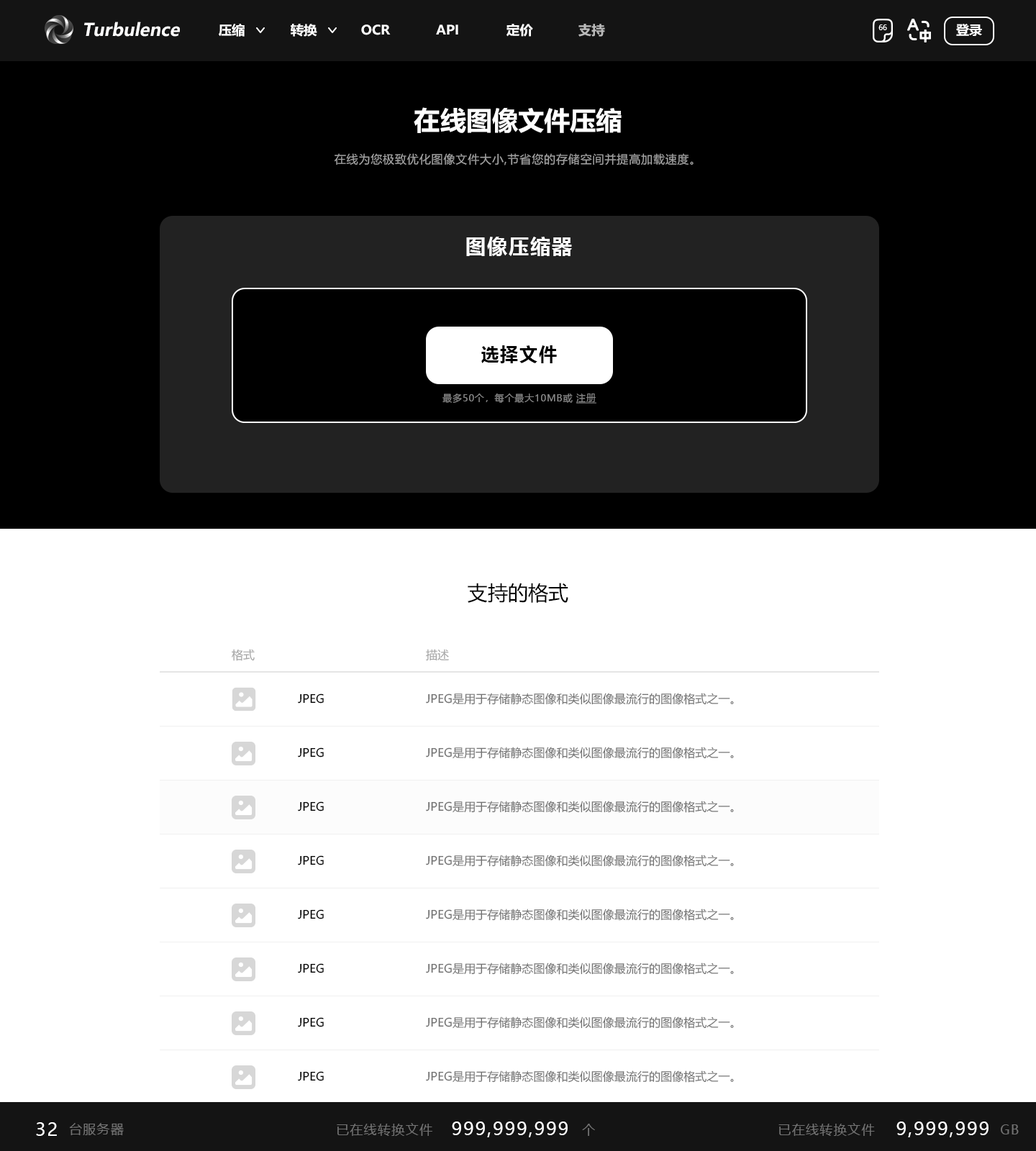
<style>
.page{position:relative;width:1036px;height:1151px;background:#ffffff}
.page>*{position:absolute;margin:0}
.t1{font:17.3px "MicrosoftYaHei-Bold";color:#fffefe;font-style:italic}
.t2{font:12.9px "MicrosoftYaHei-Bold";color:#ffffff}
.t3{font:12.9px "MicrosoftYaHei-Bold";color:#ffffff;text-transform:uppercase}
.t4{font:12.9px "MicrosoftYaHei-Bold";color:#bababa;text-transform:uppercase}
.t5{font:7.2px "MicrosoftYaHei";color:#ffffff;text-transform:uppercase}
.t6{font:25.9px "MicrosoftYaHei-Bold";color:#ffffff}
.t7{font:11.5px "MicrosoftYaHei";letter-spacing:0.05em;color:#a3a3a3}
.t8{font:20.1px "MicrosoftYaHei-Bold";letter-spacing:0.075em;color:#ffffff;text-transform:uppercase}
.t9{font:18px "MicrosoftYaHei-Bold";letter-spacing:0.075em;color:#000000}
.t10{font:9.4px "MicrosoftYaHei";letter-spacing:0.066em;color:#878787}
.t11{font:9.4px "MicrosoftYaHei";letter-spacing:0.066em;color:#878787;text-decoration:underline}
.t12{font:20.1px "MicrosoftYaHei";color:#000000}
.t13{font:11.5px "MicrosoftYaHei";color:#a3a3a3}
.t14{font:11.5px "MicrosoftYaHei";color:#000000}
.t15{font:11.5px "MicrosoftYaHei";color:#737373}
.t16{font:11.5px "MicrosoftYaHei";color:#727272}
.t17{font:18px "MicrosoftYaHei";letter-spacing:0.075em;color:#ffffff;text-transform:uppercase}
.t18{font:18px "MicrosoftYaHei";letter-spacing:0.075em;color:#ffffff}
.t19{font:12.9px "MicrosoftYaHei";letter-spacing:0.075em;color:#727272}
</style>
<div class="page">
<p class="t1" style="left:84px;top:22px;width:96px;height:15px">Turbulence</p>
<p class="t2" style="left:219px;top:24px;width:26px;height:13px">压缩</p>
<p class="t3" style="left:291px;top:24px;width:26px;height:13px">转换</p>
<p class="t3" style="left:361px;top:24px;width:30px;height:11px">OCR</p>
<p class="t3" style="left:436px;top:24px;width:22px;height:11px">API</p>
<p class="t3" style="left:506px;top:24px;width:27px;height:13px">定价</p>
<p class="t4" style="left:578px;top:24px;width:27px;height:13px">支持</p>
<p class="t5" style="left:878px;top:24px;width:9px;height:6px">66</p>
<p class="t3" style="left:956px;top:24px;width:26px;height:12px">登录</p>
<p class="t6" style="left:414px;top:107px;width:208px;height:26px">在线图像文件压缩</p>
<p class="t7" style="left:335px;top:153px;width:359px;height:12px">在线为您极致优化图像文件大小,节省您的存储空间并提高加载速度。</p>
<p class="t8" style="left:466px;top:237px;width:106px;height:19px">图像压缩器</p>
<p class="t9" style="left:481px;top:345px;width:76px;height:18px">选择文件</p>
<p class="t10" style="left:442px;top:393px;width:154px;height:11px">最多50个，每个最大10MB或 <span class="t11">注册</span></p>
<p class="t12" style="left:468px;top:583px;width:100px;height:20px">支持的格式</p>
<p class="t13" style="left:232px;top:649px;width:23px;height:12px">格式</p>
<p class="t13" style="left:426px;top:649px;width:23px;height:12px">描述</p>
<p class="t14" style="left:298px;top:694px;width:26px;height:10px">JPEG</p>
<p class="t15" style="left:426px;top:693px;width:308px;height:12px">JPEG是用于存储静态图像和类似图像最流行的图像格式之一。</p>
<p class="t14" style="left:298px;top:747px;width:26px;height:11px">JPEG</p>
<p class="t15" style="left:426px;top:747px;width:308px;height:12px">JPEG是用于存储静态图像和类似图像最流行的图像格式之一。</p>
<p class="t14" style="left:298px;top:801px;width:26px;height:10px">JPEG</p>
<p class="t16" style="left:426px;top:801px;width:308px;height:12px">JPEG是用于存储静态图像和类似图像最流行的图像格式之一。</p>
<p class="t14" style="left:298px;top:855px;width:26px;height:10px">JPEG</p>
<p class="t15" style="left:426px;top:855px;width:308px;height:12px">JPEG是用于存储静态图像和类似图像最流行的图像格式之一。</p>
<p class="t14" style="left:298px;top:909px;width:26px;height:10px">JPEG</p>
<p class="t15" style="left:426px;top:909px;width:308px;height:12px">JPEG是用于存储静态图像和类似图像最流行的图像格式之一。</p>
<p class="t14" style="left:298px;top:963px;width:26px;height:10px">JPEG</p>
<p class="t15" style="left:426px;top:963px;width:308px;height:12px">JPEG是用于存储静态图像和类似图像最流行的图像格式之一。</p>
<p class="t14" style="left:298px;top:1017px;width:26px;height:10px">JPEG</p>
<p class="t15" style="left:426px;top:1017px;width:308px;height:12px">JPEG是用于存储静态图像和类似图像最流行的图像格式之一。</p>
<p class="t14" style="left:298px;top:1071px;width:26px;height:10px">JPEG</p>
<p class="t15" style="left:426px;top:1070px;width:308px;height:13px">JPEG是用于存储静态图像和类似图像最流行的图像格式之一。</p>
<p class="t17" style="left:452px;top:1122px;width:116px;height:15px">999,999,999</p>
<p class="t17" style="left:896px;top:1122px;width:92px;height:15px">9,999,999</p>
<p class="t18" style="left:36px;top:1122px;width:21px;height:14px">32</p>
<p class="t19" style="left:69px;top:1123px;width:55px;height:13px">台服务器</p>
</div>
